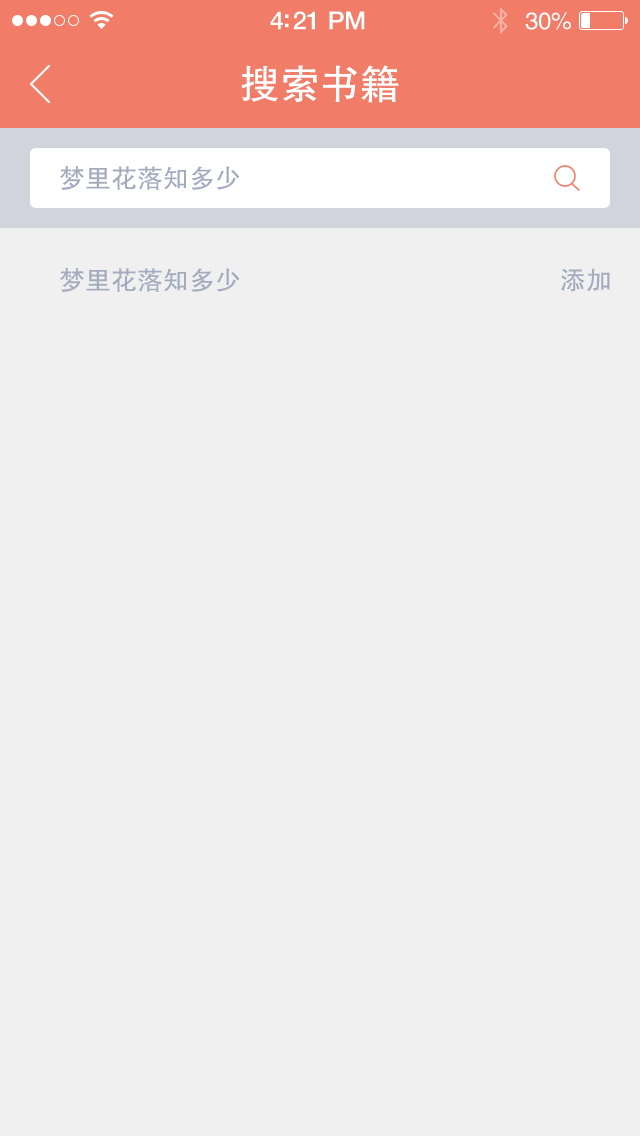
<style>
.page{position:relative;width:640px;height:1136px;background:#f0f0f0}
.page>*{position:absolute;margin:0}
.t1{font:25px "HelveticaNeue-Medium";letter-spacing:-0.02em;color:#ffffff}
.t2{font:24px "FZHTJW--GB1-0";letter-spacing:-0.02em;color:#ffffff}
.t3{font:40px "FZHTJW--GB1-0";color:#ffffff}
.t4{font:26px "FZHTJW--GB1-0";color:#a3abbe}
</style>
<div class="page">
<p class="t1" style="left:270px;top:11px;width:95px;height:19px">4:21 PM</p>
<p class="t2" style="left:525px;top:12px;width:46px;height:18px">30%</p>
<p class="t3" style="left:241px;top:65px;width:158px;height:38px">搜索书籍</p>
<p class="t4" style="left:59px;top:165px;width:181px;height:25px">梦里花落知多少</p>
<p class="t4" style="left:59px;top:267px;width:181px;height:25px">梦里花落知多少</p>
<p class="t4" style="left:561px;top:268px;width:49px;height:24px">添加</p>
</div>
